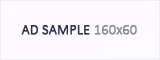
<style>
.page{position:relative;width:160px;height:60px;background:#fcfaff}
.page>*{position:absolute;margin:0}
.t1{font:14px "Calibri-Light";color:#303147;font-weight:bold}
.t2{font:14px "Calibri-Light";color:#8c8c8c;font-weight:bold}
</style>
<div class="page">
<p class="t1" style="left:21px;top:25px;width:116px;height:10px">AD SAMPLE <span class="t2">160x60</span></p>
</div>
